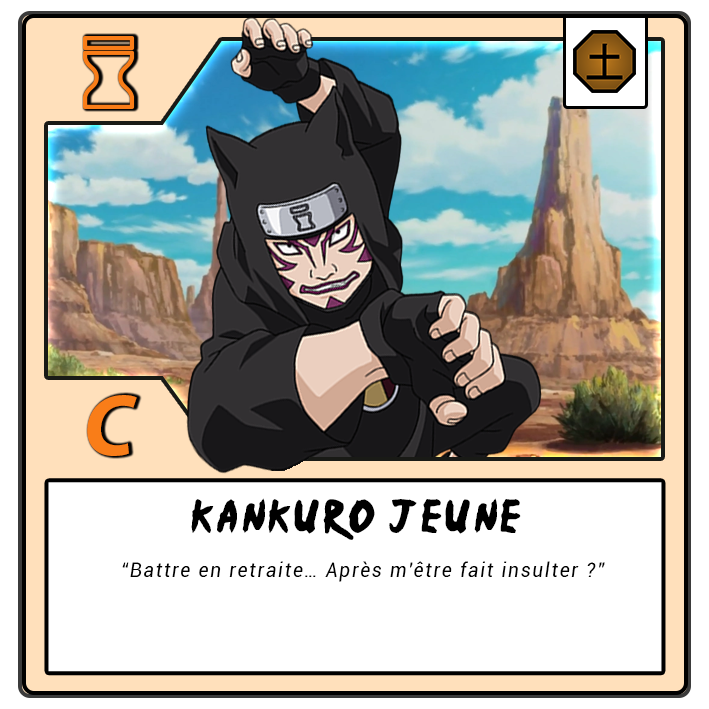
<style>
.page{position:relative;width:709px;height:709px;background:#ffffff}
.page>*{position:absolute;margin:0}
.t1{font:87.5px "MyriadPro-BoldIt";letter-spacing:-0.12em;color:#f97d18}
.t2{font:37.5px "Ninja-Naruto";letter-spacing:0.1em;color:#000000}
.t3{font:20.8px "Roboto-Italic";letter-spacing:0.1em;color:#000000;scale:0.9 1}
</style>
<div class="page">
<p class="t1" style="left:87px;top:395px;width:50px;height:61px">C</p>
<p class="t2" style="left:191px;top:498px;width:330px;height:42px">Kankuro Jeune</p>
<p class="t3" style="left:122px;top:561px;width:483px;height:21px">“Battre en retraite… Après m'être fait insulter ?”</p>
</div>
